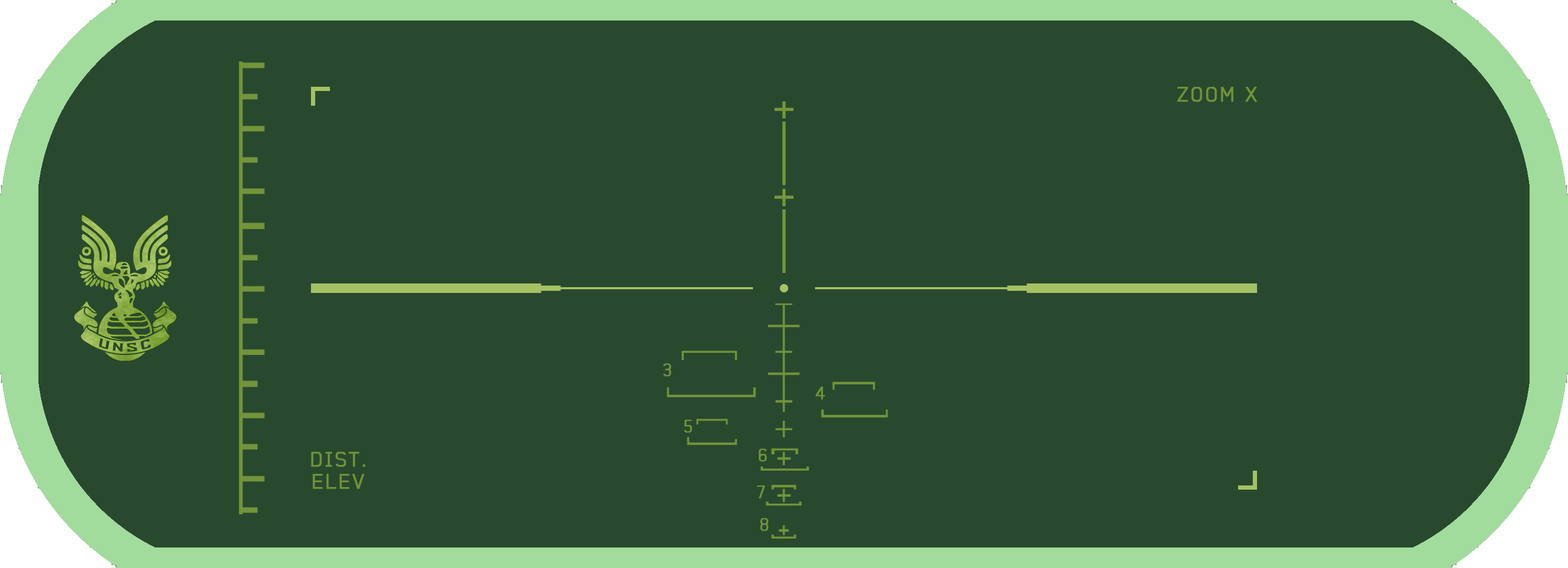
<style>
.page{position:relative;width:1568px;height:568px;background:#28492e}
.page>*{position:absolute;margin:0}
.t1{font:20.5px "Baksheesh";letter-spacing:0.08em;color:#719239;font-weight:bold}
.t2{font:17.8px "Baksheesh";letter-spacing:0.08em;color:#719239;font-weight:bold}
.t3{font:20.5px/21.9px "Baksheesh";letter-spacing:0.08em;color:#719239;font-weight:bold}
</style>
<div class="page">
<p class="t1" style="left:1177px;top:87px;width:80px;height:15px">ZOOM X</p>
<p class="t2" style="left:663px;top:364px;width:8px;height:13px">3</p>
<p class="t2" style="left:816px;top:387px;width:9px;height:13px">4</p>
<p class="t2" style="left:684px;top:420px;width:8px;height:13px">5</p>
<p class="t2" style="left:759px;top:449px;width:8px;height:13px">6</p>
<p class="t3" style="left:311px;top:452px;width:55px;height:37px;text-align:center">DIST.<br>ELEV</p>
<p class="t2" style="left:757px;top:486px;width:8px;height:13px">7</p>
<p class="t2" style="left:760px;top:518px;width:9px;height:13px">8</p>
</div>
